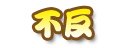
<style>
.page{position:relative;width:126px;height:48px;background:#ffffff}
.page>*{position:absolute;margin:0}
.t1{font:31.9px "TKanTingLiu-Ultra";scale:0.95 1}
</style>
<div class="page">
<p class="t1" style="left:34px;top:8px;width:58px;height:30px">不反</p>
</div>
